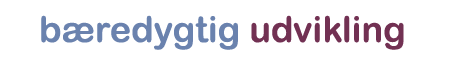
<style>
.page{position:relative;width:454px;height:64px;background:#ffffff}
.page>*{position:absolute;margin:0}
.t1{font:36px "ArialRoundedMTBold";color:#6a82ae}
.t2{font:36px "ArialRoundedMTBold";color:#723153}
</style>
<div class="page">
<p class="t1" style="left:41px;top:15px;width:363px;height:35px">bæredygtig <span class="t2">udvikling</span></p>
</div>
